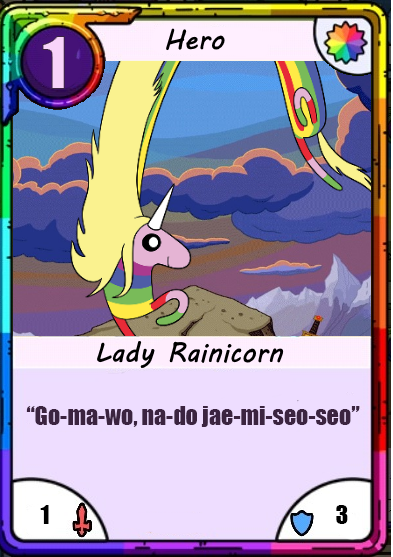
<style>
.page{position:relative;width:393px;height:557px}
.page>*{position:absolute;margin:0}
.t1{font:66.7px "Impact";color:#f8d4fa}
.t2{font:24px "Impact";color:#3b2440}
.t3{font:24px "Impact";color:#000000}
</style>
<div class="page">
<p class="t1" style="left:42px;top:36px;width:23px;height:53px">1</p>
<p class="t2" style="left:26px;top:406px;width:334px;height:21px">“Go-ma-wo, na-do jae-mi-seo-seo”</p>
<p class="t3" style="left:40px;top:505px;width:9px;height:19px">1</p>
<p class="t3" style="left:336px;top:505px;width:12px;height:19px">3</p>
</div>
